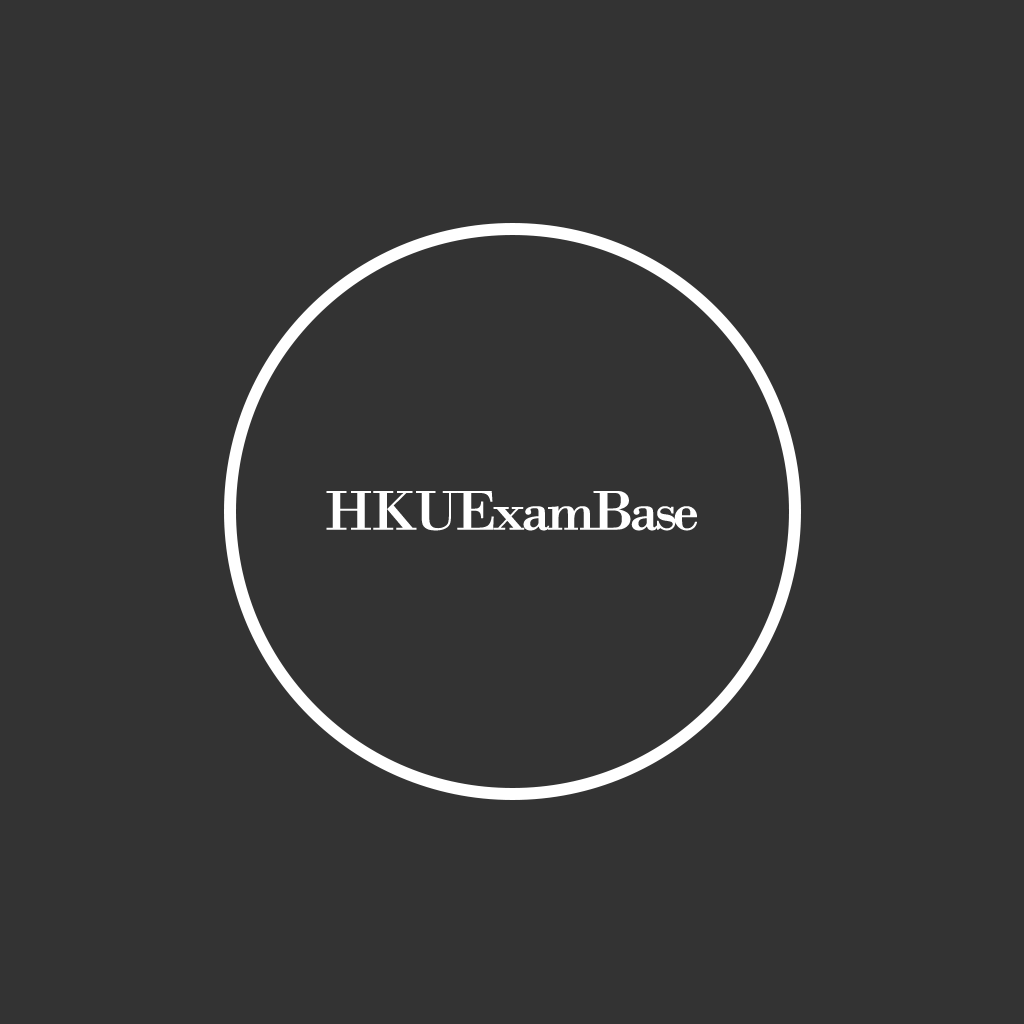
<style>
.page{position:relative;width:1024px;height:1024px;background:#333333}
.page>*{position:absolute;margin:0}
.t1{font:58.3px "BodoniMT";letter-spacing:-0.1em;color:#ffffff;font-weight:bold;scale:1.04 1}
</style>
<div class="page">
<p class="t1" style="left:326px;top:491px;width:371px;height:40px">HKUExamBase</p>
</div>
